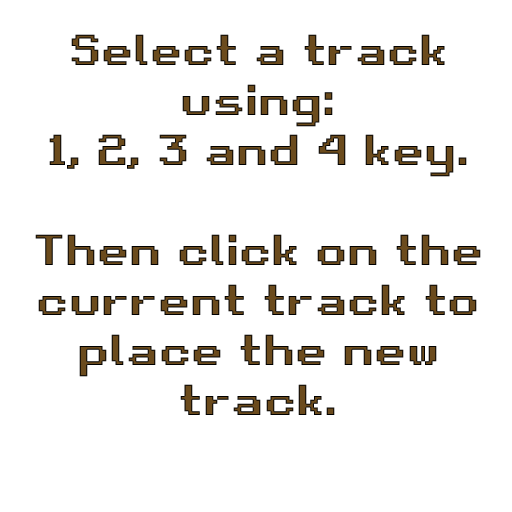
<style>
.page{position:relative;width:512px;height:512px;background:#ffffff}
.page>*{position:absolute;margin:0}
.t1{font:41.7px "RetroGaming"}
</style>
<div class="page">
<p class="t1" style="left:35px;top:34px;width:446px;height:381px;text-align:center">Select a track using:<br>1, 2, 3 and 4 key.<br><br>Then click on the current track to place the new track.</p>
</div>
